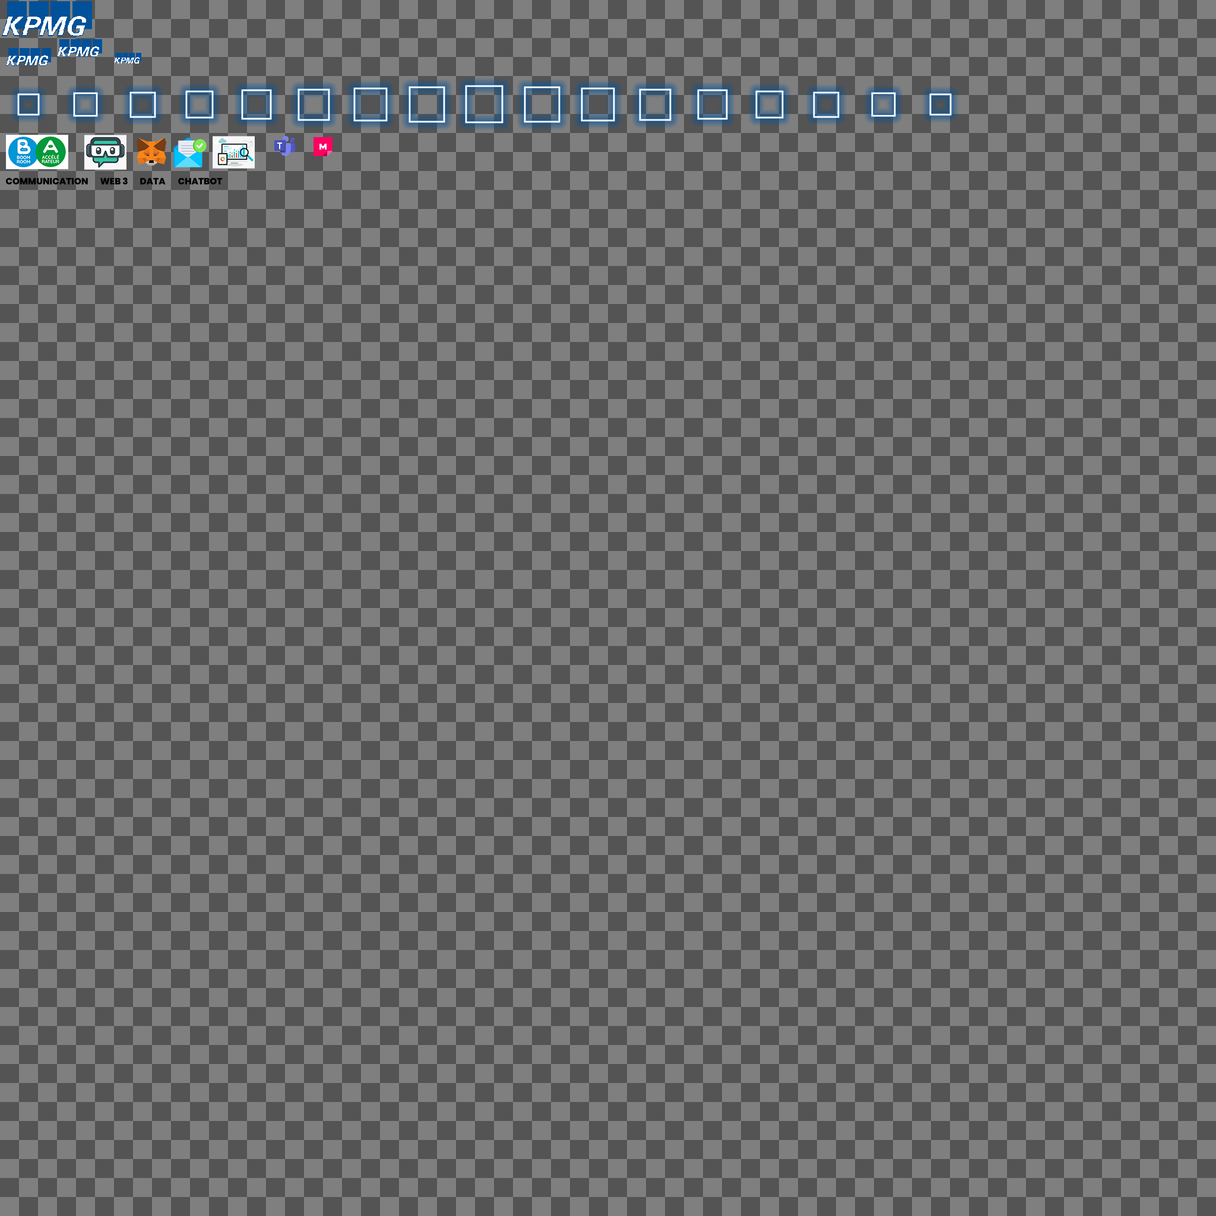
<style>
.page{position:relative;width:1216px;height:1216px;background:#545454}
.page>*{position:absolute;margin:0}
.t1{font:9px "Poppins-ExtraBold";color:#000000;text-transform:uppercase}
</style>
<div class="page">
<p class="t1" style="left:6px;top:178px;width:82px;height:7px">COMMunication</p>
<p class="t1" style="left:100px;top:178px;width:28px;height:7px">WEB 3</p>
<p class="t1" style="left:140px;top:178px;width:26px;height:7px">DATA</p>
<p class="t1" style="left:178px;top:178px;width:45px;height:7px">CHATBOT</p>
</div>
